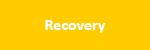
<style>
.page{position:relative;width:150px;height:50px;background:#ffcc00}
.page>*{position:absolute;margin:0}
.t1{font:16px "Calibri-Bold";color:#ffffff}
</style>
<div class="page">
<p class="t1" style="left:45px;top:20px;width:61px;height:13px">Recovery</p>
</div>
